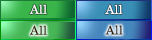
<style>
.page{position:relative;width:152px;height:40px}
.page>*{position:absolute;margin:0}
.t1{font:12px "CenturySchoolbook";letter-spacing:0.025em;color:#ffffff}
.t2{font:12px "CenturySchoolbook";letter-spacing:0.025em;color:#321a02}
</style>
<div class="page">
<p class="t1" style="left:29px;top:4px;width:18px;height:10px">All</p>
<p class="t1" style="left:105px;top:4px;width:18px;height:10px">All</p>
<p class="t2" style="left:30px;top:25px;width:17px;height:10px">All</p>
<p class="t2" style="left:105px;top:25px;width:18px;height:10px">All</p>
</div>
